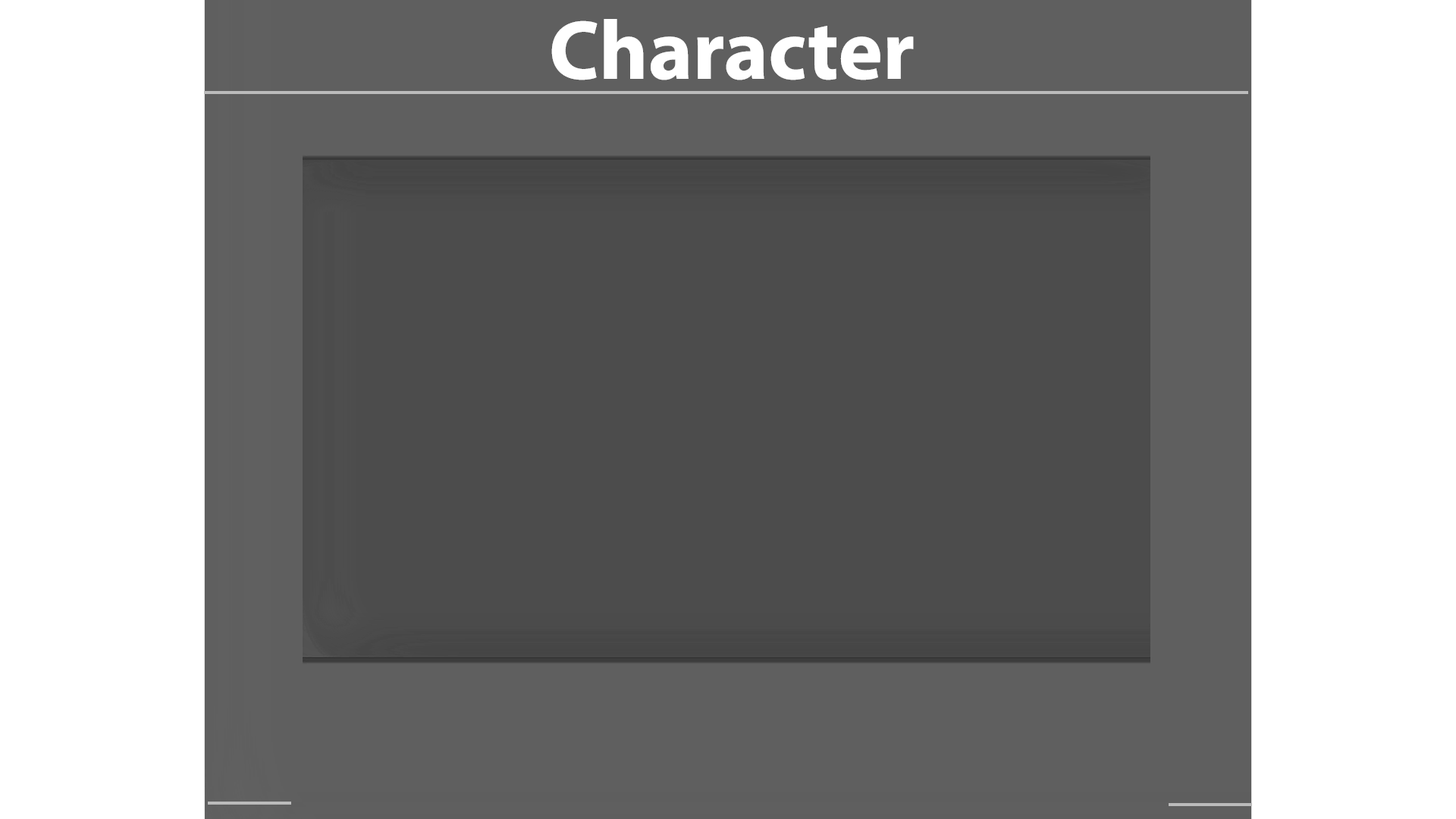
<style>
.page{position:relative;width:1456px;height:819px;background:#5f5f5f}
.page>*{position:absolute;margin:0}
.t1{font:84.3px "MyriadPro-Bold";color:#ffffff}
</style>
<div class="page">
<p class="t1" style="left:551px;top:19px;width:363px;height:61px">Character</p>
</div>
